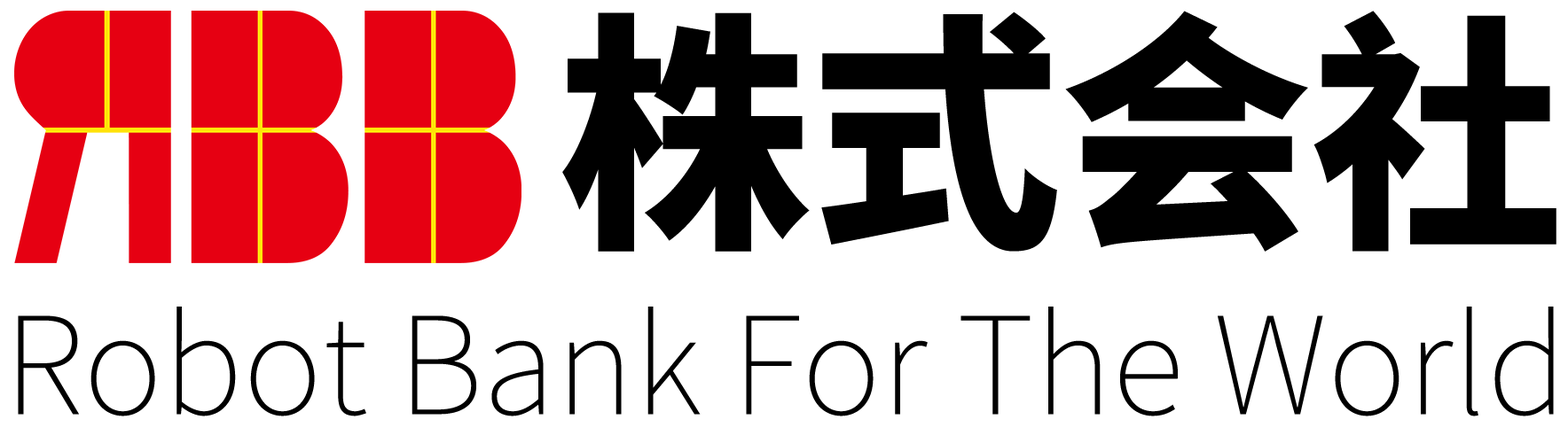
<style>
.page{position:relative;width:1568px;height:443px;background:#ffffff}
.page>*{position:absolute;margin:0}
.t1{font:250.9px "SourceHanSansCN-Heavy";color:#000000}
.t2{font:135.4px "SourceHanSansCN-ExtraLight";color:#000000}
</style>
<div class="page">
<p class="t1" style="left:562px;top:11px;width:994px;height:241px">株式会社</p>
<p class="t2" style="left:18px;top:307px;width:1536px;height:110px">Robot Bank For The World</p>
</div>
